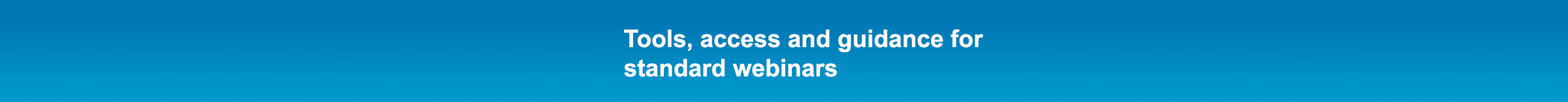
<style>
.page{position:relative;width:1568px;height:102px}
.page>*{position:absolute;margin:0}
.t1{font:24.2px/29.3px "Arial-BoldMT";color:#ffffff}
</style>
<div class="page">
<p class="t1" style="left:624px;top:29px;width:359px;height:48px">Tools, access and guidance for<br>standard webinars</p>
</div>
